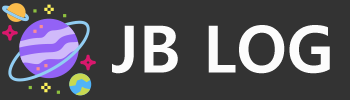
<style>
.page{position:relative;width:350px;height:100px;background:#333333}
.page>*{position:absolute;margin:0}
.t1{font:65px "MalgunGothicBold";color:#fcfcfc}
</style>
<div class="page">
<p class="t1" style="left:112px;top:25px;width:218px;height:49px">JB LOG</p>
</div>
